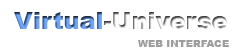
<style>
.page{position:relative;width:250px;height:50px;background:#ffffff}
.page>*{position:absolute;margin:0}
.t1{font:24px "Arial-Black"}
.t2{font:10px "Arial-Black";color:#9d9d9d}
</style>
<div class="page">
<p class="t1" style="left:14px;top:12px;width:213px;height:17px">Virtual-Universe</p>
<p class="t2" style="left:138px;top:40px;width:91px;height:7px">WEB INTERFACE</p>
<p class="t2" style="left:138px;top:40px;width:91px;height:7px">WEB INTERFACE</p>
</div>
